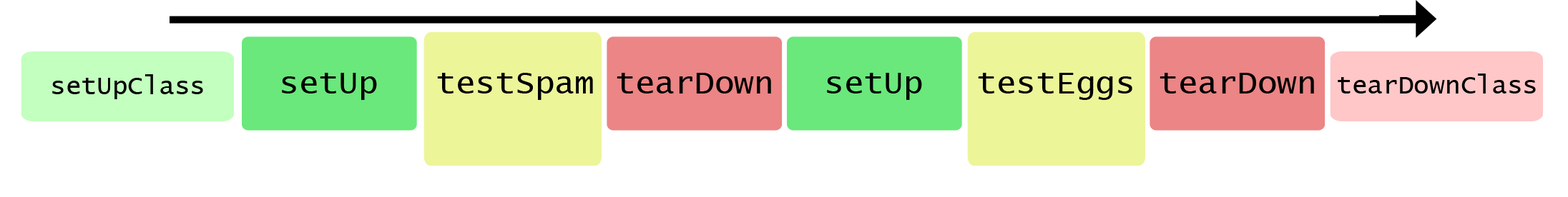
<style>
.page{position:relative;width:1568px;height:197px;background:#ffffff}
.page>*{position:absolute;margin:0}
.t1{font:25.8px "LucidaConsole";color:#000000}
.t2{font:32.9px "LucidaConsole";color:#000000}
</style>
<div class="page">
<p class="t1" style="left:52px;top:74px;width:151px;height:25px">setUpClass</p>
<p class="t2" style="left:282px;top:73px;width:95px;height:27px">setUp</p>
<p class="t2" style="left:437px;top:73px;width:156px;height:27px">testSpam</p>
<p class="t2" style="left:617px;top:73px;width:154px;height:21px">tearDown</p>
<p class="t2" style="left:827px;top:73px;width:95px;height:27px">setUp</p>
<p class="t2" style="left:978px;top:73px;width:154px;height:27px">testEggs</p>
<p class="t2" style="left:1160px;top:73px;width:154px;height:21px">tearDown</p>
<p class="t1" style="left:1338px;top:74px;width:198px;height:20px">tearDownClass</p>
</div>
